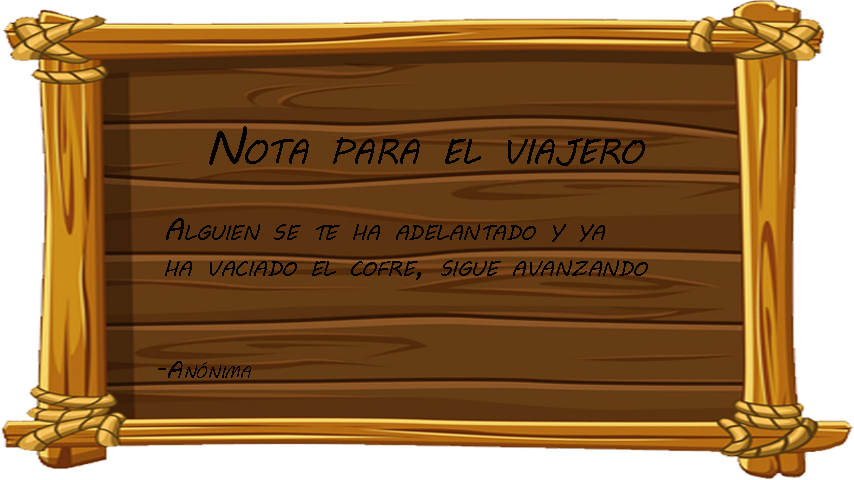
<style>
.page{position:relative;width:854px;height:480px}
.page>*{position:absolute;margin:0}
.t1{font:48px "MVBoli";letter-spacing:-0.025em;color:#000000;font-variant:small-caps}
.t2{font:30px "MVBoli";letter-spacing:-0.025em;color:#000000;font-variant:small-caps}
.t3{font:24px "MVBoli";letter-spacing:-0.025em;color:#000000;font-variant:small-caps}
</style>
<div class="page">
<p class="t1" style="left:209px;top:126px;width:436px;height:40px">Nota para el viajero</p>
<p class="t2" style="left:165px;top:218px;width:483px;height:62px">Alguien se te ha adelantado y ya <br>ha vaciado el cofre, sigue avanzando</p>
<p class="t3" style="left:158px;top:361px;width:93px;height:17px">-Anónima</p>
</div>
